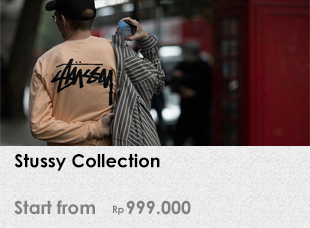
<style>
.page{position:relative;width:310px;height:228px}
.page>*{position:absolute;margin:0}
.t1{font:18px "CenturyGothic-Bold";color:#000000}
.t2{font:18px "CenturyGothic-Bold";color:#818181}
.t3{font:10px "CenturyGothic-Bold";color:#818181}
</style>
<div class="page">
<p class="t1" style="left:14px;top:153px;width:146px;height:18px">Stussy Collection</p>
<p class="t2" style="left:14px;top:200px;width:81px;height:15px">Start from</p>
<p class="t3" style="left:113px;top:205px;width:11px;height:10px">Rp</p>
<p class="t2" style="left:126px;top:200px;width:65px;height:15px">999.000</p>
</div>
